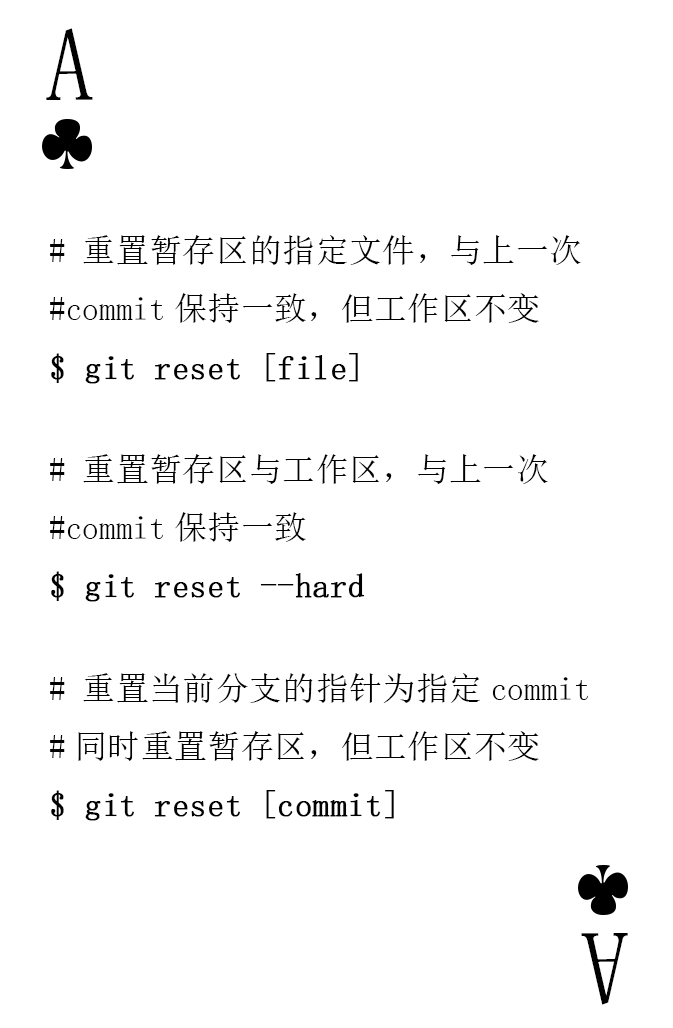
<style>
.page{position:relative;width:673px;height:1028px;background:#ffffff}
.page>*{position:absolute;margin:0}
.t1{font:104.2px "SimSun-ExtB";color:#010101;scale:0.93 1}
.t2{font:33.3px "SimSun";color:#010101}
.t3{font:33.3px "SimSun";color:#010101;font-weight:bold}
</style>
<div class="page">
<p class="t1" style="left:46px;top:28px;width:47px;height:72px">A</p>
<p class="t2" style="left:50px;top:235px;width:538px;height:586px"># 重置暂存区的指定文件，与上一次<br>#commit保持一致，但工作区不变<br><span class="t3">$ git reset [file]<br> <br></span># 重置暂存区与工作区，与上一次<br>#commit保持一致<br><span class="t3">$ git reset --hard<br> <br></span># 重置当前分支的指针为指定commit<br>#同时重置暂存区，但工作区不变<br><span class="t3">$ git reset [commit]</span></p>
<p class="t1" style="left:581px;top:933px;width:47px;height:72px;rotate:180deg">A</p>
</div>
